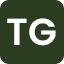
<style>
.page{position:relative;width:64px;height:64px;background:#2c3c20}
.page>*{position:absolute;margin:0}
.t1{font:37.5px "Poppins-SemiBold";color:#ffffff}
</style>
<div class="page">
<p class="t1" style="left:7px;top:18px;width:49px;height:28px">TG</p>
</div>
